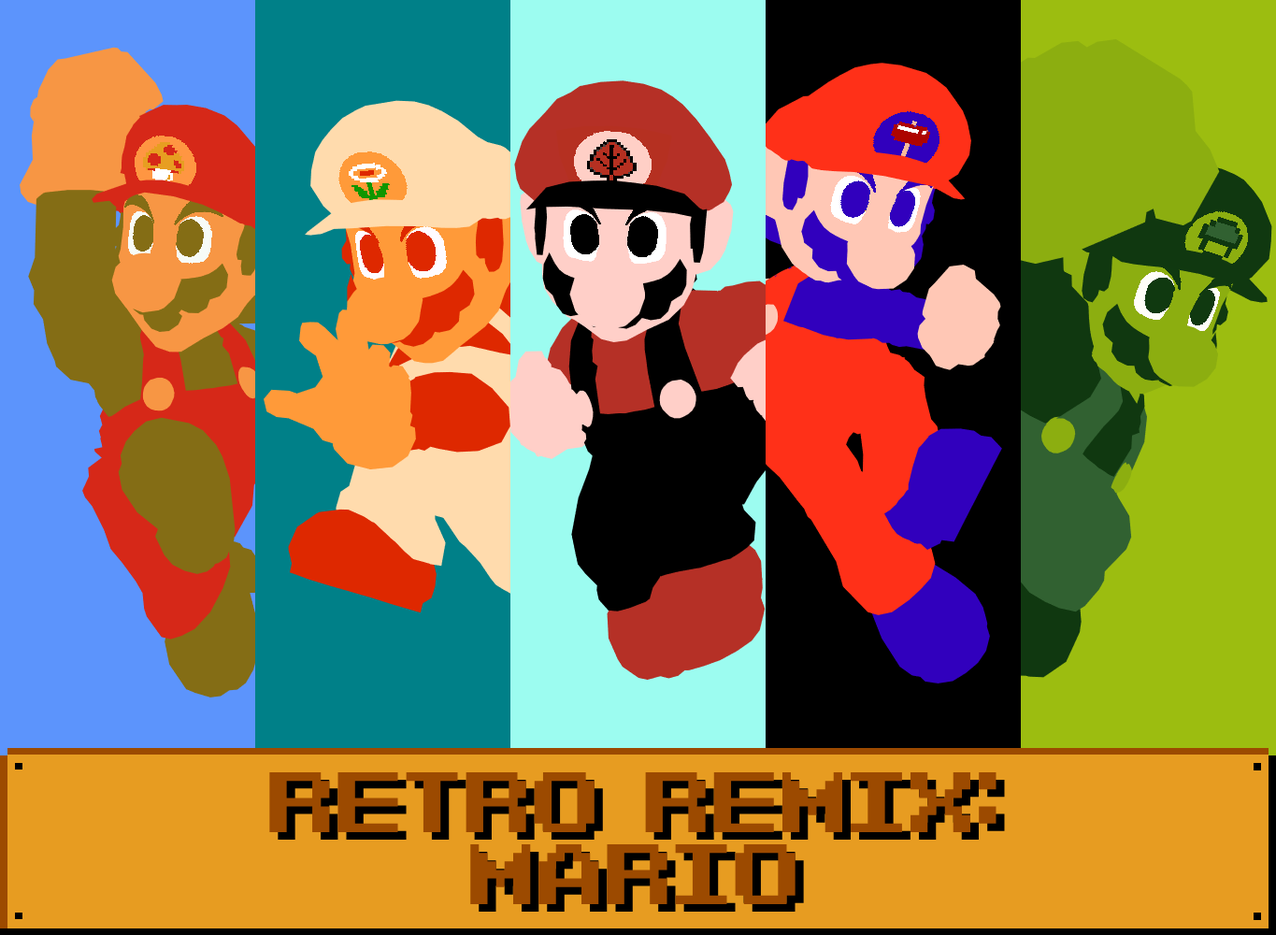
<style>
.page{position:relative;width:1276px;height:935px}
.page>*{position:absolute;margin:0}
.t1{font:59.8px "Barcade-Brawl";color:#9c4a00}
.t2{font:59.8px "Barcade-Brawl"}
</style>
<div class="page">
<p class="t1" style="left:269px;top:772px;width:727px;height:132px;text-align:center">RETRO REMIX: <br>MARIO</p>
<p class="t2" style="left:278px;top:780px;width:727px;height:131px;text-align:center">RETRO REMIX:<br>MARIO</p>
</div>
